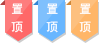
<style>
.page{position:relative;width:99px;height:43px;background:#ffffff}
.page>*{position:absolute;margin:0}
.t1{font:12px "SimHei";color:#ffffff}
</style>
<div class="page">
<p class="t1" style="left:11px;top:3px;width:12px;height:30px">置 顶</p>
<p class="t1" style="left:46px;top:3px;width:12px;height:30px">置 顶</p>
<p class="t1" style="left:79px;top:3px;width:12px;height:30px">置 顶</p>
</div>
